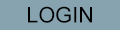
<style>
.page{position:relative;width:120px;height:30px;background:#87a3af}
.page>*{position:absolute;margin:0}
.t1{font:21.4px "ArialMT";letter-spacing:0.01em;color:#000000;text-transform:uppercase}
</style>
<div class="page">
<p class="t1" style="left:28px;top:6px;width:64px;height:17px">login</p>
</div>
